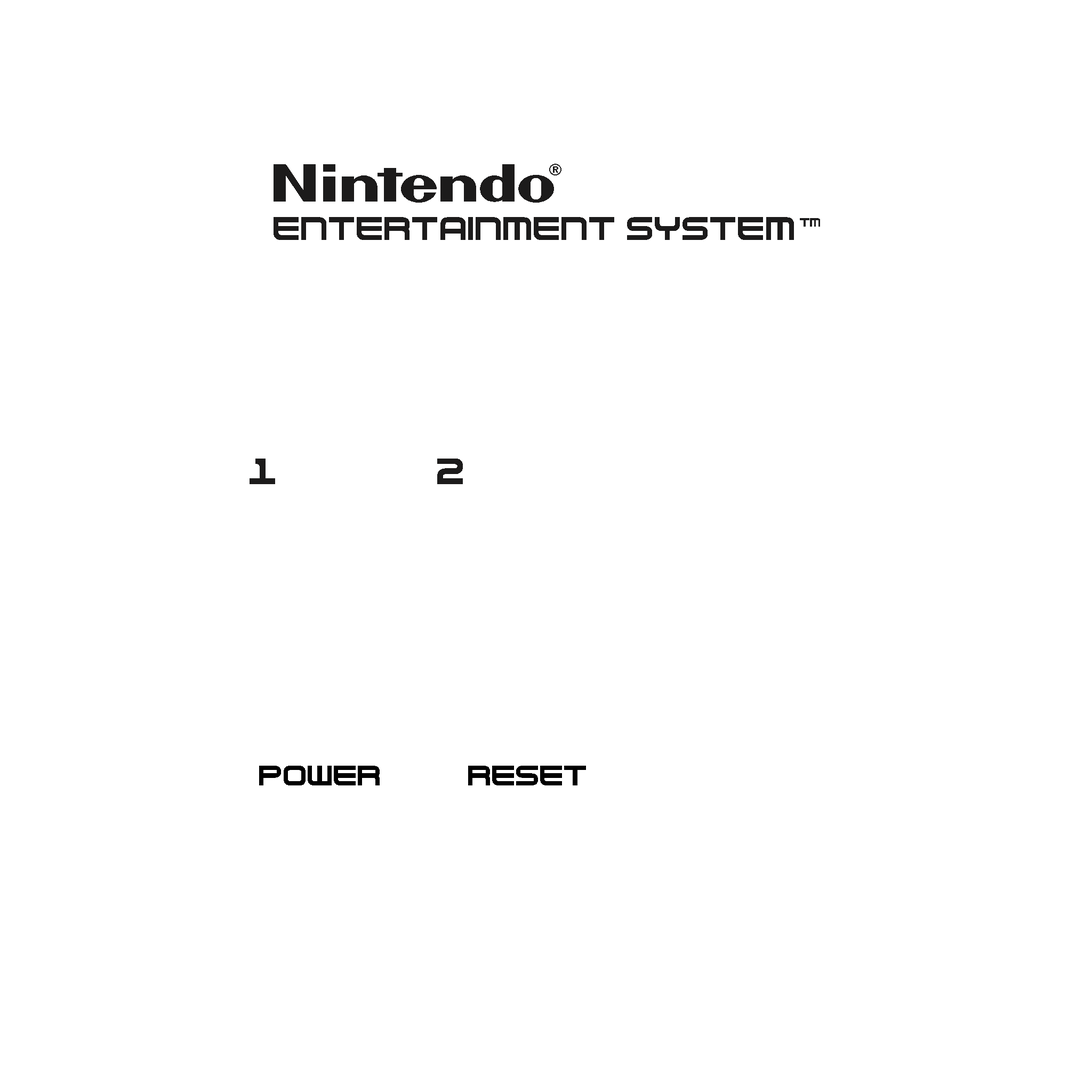
<style>
.page{position:relative;width:1092px;height:1092px;background:#ffffff}
.page>*{position:absolute;margin:0}
.t1{font:37.3px "RO-Spritendo-SemiBold-BETA";color:#1c1b1b}
.t2{font:38.4px "RO-Spritendo-SemiBold-BETA";color:#1c1b1b}
.t3{font:51.7px "NesController";color:#1c1b1b}
.t4{font:19.2px "NesController";color:#1c1b1b}
.t5{font:58.7px "NesController";color:#1c1b1b}
.t6{font:44.8px "NesController";color:#000000}
</style>
<div class="page">
<p class="t1" style="left:274px;top:164px;width:280px;height:39px">Nintendo</p>
<p class="t2" style="left:549px;top:164px;width:12px;height:11px">®</p>
<p class="t3" style="left:274px;top:217px;width:520px;height:23px">ENTERTAINMENT SYSTEM</p>
<p class="t4" style="left:800px;top:218px;width:20px;height:9px">tm</p>
<p class="t5" style="left:250px;top:459px;width:25px;height:25px">1</p>
<p class="t5" style="left:437px;top:459px;width:26px;height:25px">2</p>
<p class="t6" style="left:259px;top:766px;width:121px;height:19px">power</p>
<p class="t6" style="left:468px;top:766px;width:118px;height:19px">RESET</p>
</div>
